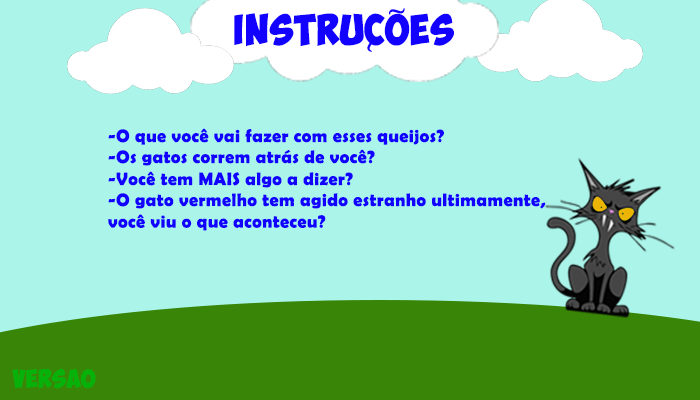
<style>
.page{position:relative;width:700px;height:400px;background:#abf4e9}
.page>*{position:absolute;margin:0}
.t1{font:30.3px "ObelixPro";letter-spacing:0.025em;color:#1301ff}
.t2{font:30.3px "TimesNewRomanPS-BoldMT";letter-spacing:0.025em;color:#1301ff}
.t3{font:18px "BerlinSansFBDemi-Bold";letter-spacing:0.025em;color:#1301ff}
.t4{font:18px "ObelixPro";letter-spacing:0.025em;color:#06b20a}
</style>
<div class="page">
<p class="t1" style="left:234px;top:13px;width:220px;height:34px">instrUCoes</p>
<p class="t2" style="left:389px;top:8px;width:16px;height:7px;rotate:-5deg">~</p>
<p class="t2" style="left:367px;top:35px;width:7px;height:17px;rotate:-79deg">~</p>
<p class="t3" style="left:108px;top:128px;width:336px;height:17px">-O que você vai fazer com esses queijos?</p>
<p class="t3" style="left:108px;top:149px;width:267px;height:17px">-Os gatos correm atrás de você?</p>
<p class="t3" style="left:108px;top:171px;width:245px;height:17px">-Você tem MAIS algo a dizer?</p>
<p class="t3" style="left:108px;top:193px;width:438px;height:38px">-O gato vermelho tem agido estranho ultimamente,<br>você viu o que aconteceu?</p>
<p class="t4" style="left:12px;top:369px;width:84px;height:20px">versao</p>
</div>
